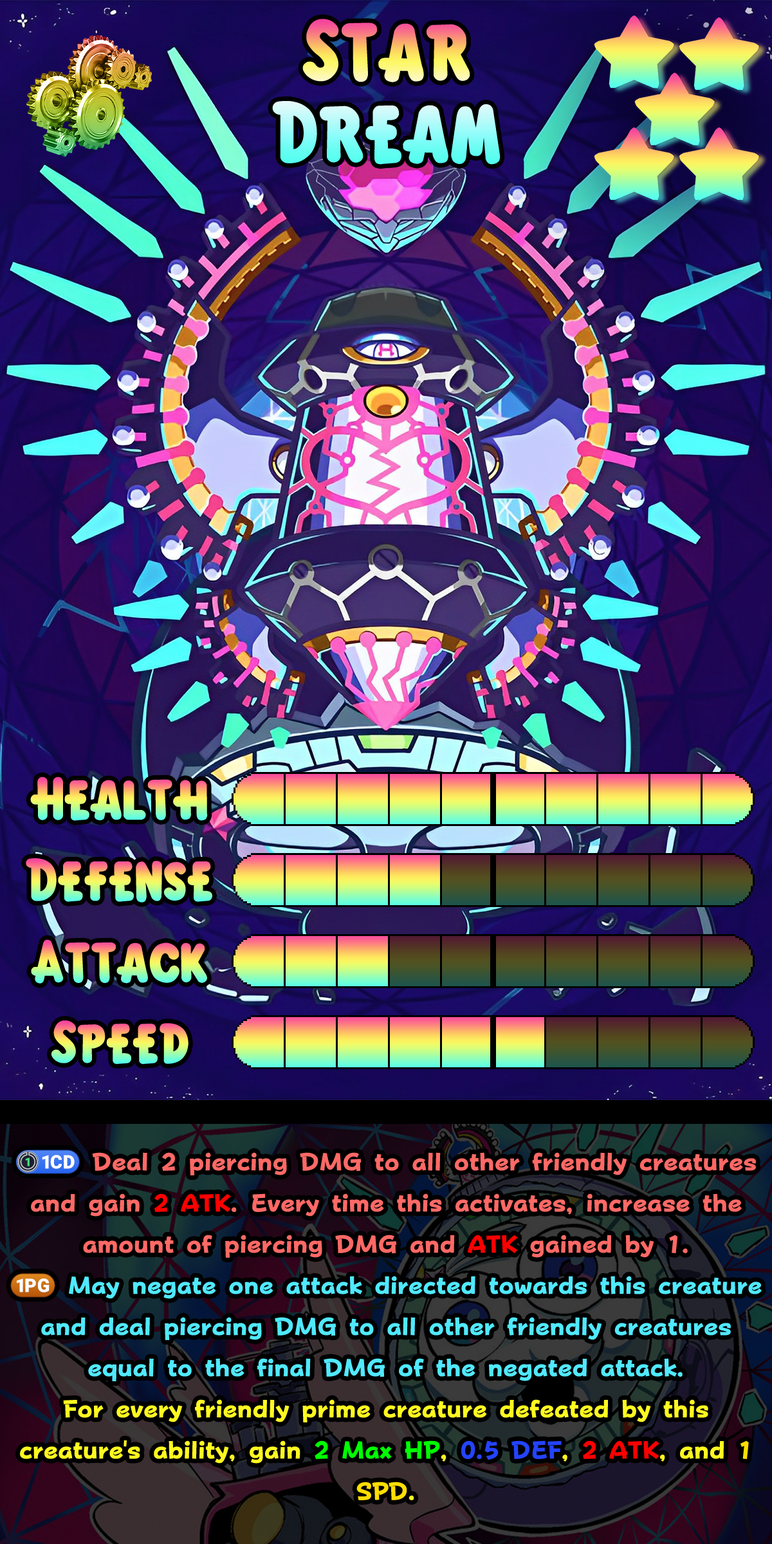
<style>
.page{position:relative;width:772px;height:1544px}
.page>*{position:absolute;margin:0}
.t1{font:135.1px/81.7px "KirbyClassic"}
.t2{font:92.7px "KirbyClassic"}
.t3{font:24.5px/41.2px "FOTPopHappinessStrp-ExtraBold";color:#50e9ff}
.t4{font:24.5px/41.2px "stoogedings-Regular";color:#ff6966}
.t5{font:24.5px/41.2px "FOTPopHappinessStrp-ExtraBold";color:#ff6966}
.t6{font:24.5px/41.2px "FOTPopHappinessStrp-ExtraBold";color:#ff0000}
.t7{font:24.5px/41.2px "stoogedings-Regular";color:#50e9ff}
.t8{font:24.5px/41.2px "FOTPopHappinessStrp-ExtraBold";color:#fff920}
.t9{font:24.5px/41.2px "FOTPopHappinessStrp-ExtraBold";color:#00ff00}
.t10{font:24.5px/41.2px "FOTPopHappinessStrp-ExtraBold";color:#2443ff}
.t11{font:24.5px/41.2px "FOTPopHappinessStrp-ExtraBold";color:#ffde00}
</style>
<div class="page">
<p class="t1" style="left:272px;top:19px;width:229px;height:146px;text-align:center">Star<br>Dream</p>
<p class="t2" style="left:30px;top:777px;width:178px;height:44px">Health</p>
<p class="t2" style="left:26px;top:858px;width:186px;height:45px">Defense</p>
<p class="t2" style="left:31px;top:939px;width:176px;height:45px">Attack</p>
<p class="t2" style="left:51px;top:1021px;width:138px;height:43px">Speed</p>
<p class="t3" style="left:10px;top:1150px;width:752px;height:351px;text-align:center"><span class="t4">(1CD)</span><span class="t5"> Deal 2 piercing DMG to all other friendly creatures and gain </span><span class="t6">2 ATK</span><span class="t5">. Every time this activates, increase the amount of piercing DMG and </span><span class="t6">ATK </span><span class="t5">gained by 1.<br></span><span class="t7">(1PG)</span> May negate one attack directed towards this creature and deal piercing DMG to all other friendly creatures equal to the final DMG of the negated attack.<br><span class="t8">For every friendly prime creature defeated by this creature's ability, gain </span><span class="t9">2 Max HP</span><span class="t8">, </span><span class="t10">0.5 DEF</span><span class="t8">, </span><span class="t6">2 ATK</span><span class="t8">, and </span><span class="t11">1 SPD</span><span class="t8">.</span></p>
</div>
